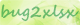
<style>
.page{position:relative;width:80px;height:25px}
.page>*{position:absolute;margin:0}
.t1{font:16px "SegoeScript-Bold";color:#6cba71}
</style>
<div class="page">
<p class="t1" style="left:1px;top:4px;width:78px;height:18px">bug2xlsx</p>
</div>
